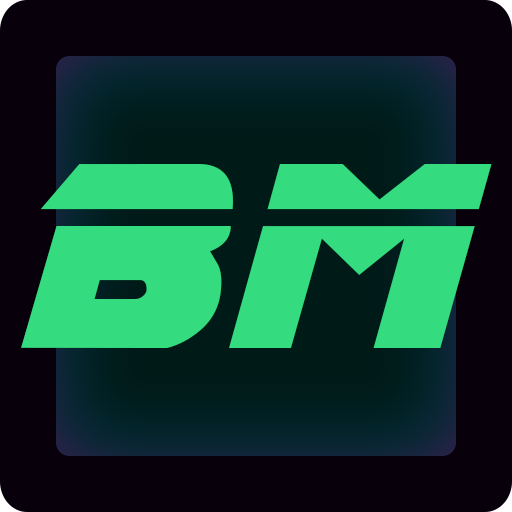
<style>
.page{position:relative;width:512px;height:512px;background:#08000b}
.page>*{position:absolute;margin:0}
.t1{font:266.7px "BladeRunnerMovieFont";color:#35db7f}
</style>
<div class="page">
<p class="t1" style="left:21px;top:164px;width:471px;height:184px">BM</p>
</div>
